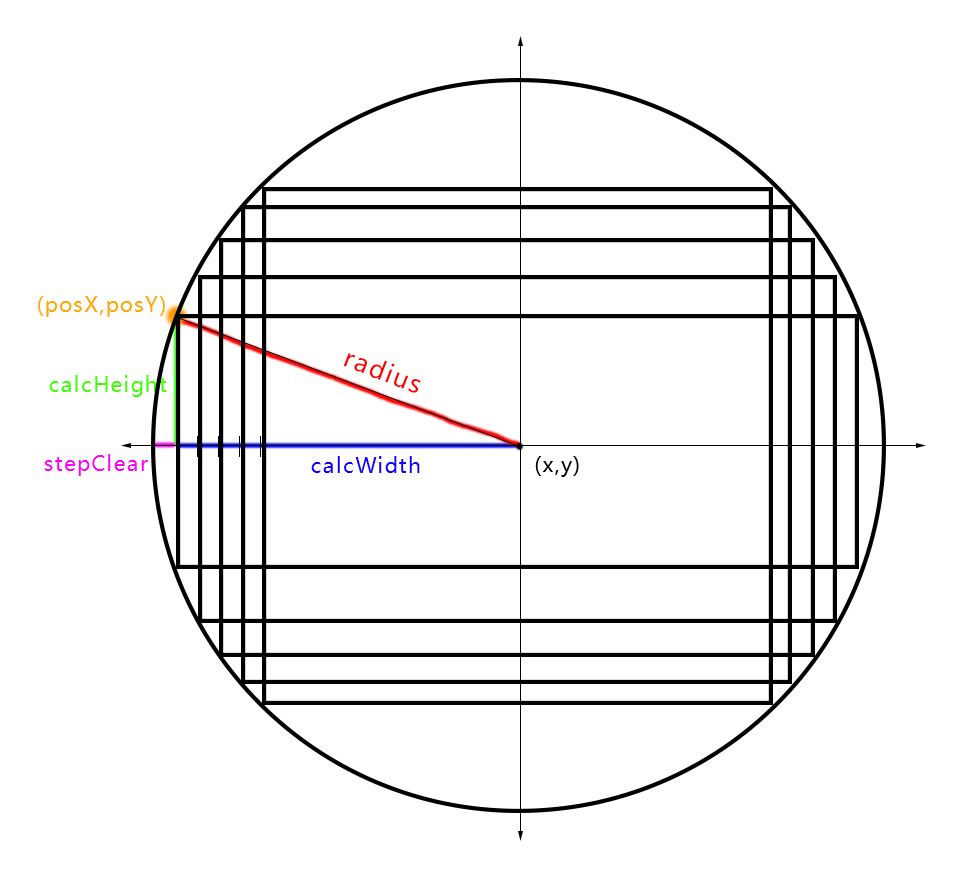
<style>
.page{position:relative;width:956px;height:871px;background:#ffffff}
.page>*{position:absolute;margin:0}
.t1{font:20.8px "MicrosoftYaHeiUI";letter-spacing:0.06em;color:#ffa800}
.t2{font:25px "MicrosoftYaHeiUI";letter-spacing:0.06em;color:#ff0000}
.t3{font:20.8px "MicrosoftYaHeiUI";letter-spacing:0.06em;color:#42ff00}
.t4{font:20.8px "MicrosoftYaHeiUI";letter-spacing:0.06em;color:#ff00fc}
.t5{font:20.8px "MicrosoftYaHeiUI";letter-spacing:0.06em;color:#1200ff}
.t6{font:20.8px "MicrosoftYaHeiUI";letter-spacing:0.06em;color:#000000}
</style>
<div class="page">
<p class="t1" style="left:38px;top:296px;width:127px;height:21px">(posX,posY)</p>
<p class="t2" style="left:343px;top:353px;width:78px;height:40px;rotate:21deg">radius</p>
<p class="t3" style="left:49px;top:375px;width:118px;height:22px">calcHeight</p>
<p class="t4" style="left:44px;top:454px;width:104px;height:22px">stepClear</p>
<p class="t5" style="left:311px;top:456px;width:109px;height:17px">calcWidth</p>
<p class="t6" style="left:535px;top:456px;width:44px;height:21px">(x,y)</p>
</div>
